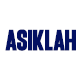
<style>
.page{position:relative;width:84px;height:81px;background:#ffffff}
.page>*{position:absolute;margin:0}
.t1{font:29px "Blue-Fonte-Sans";color:#031062;font-weight:bold;scale:0.82 1}
</style>
<div class="page">
<p class="t1" style="left:5px;top:29px;width:71px;height:22px">asiklah</p>
</div>
